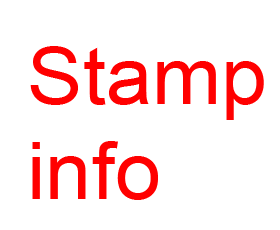
<style>
.page{position:relative;width:280px;height:230px;background:#ffffff}
.page>*{position:absolute;margin:0}
.t1{font:78.5px "ArialMT";color:#ff0000;scale:1.06 1}
</style>
<div class="page">
<p class="t1" style="left:30px;top:46px;width:234px;height:154px">Stamp<br>info</p>
</div>
